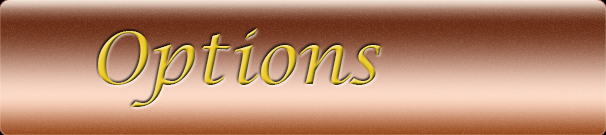
<style>
.page{position:relative;width:606px;height:135px}
.page>*{position:absolute;margin:0}
.t1{font:72px "LucidaCalligraphy-Italic"}
</style>
<div class="page">
<p class="t1" style="left:98px;top:28px;width:283px;height:79px">Options</p>
</div>
